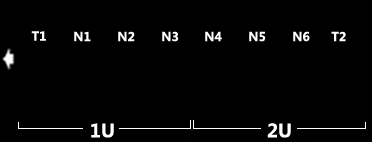
<style>
.page{position:relative;width:372px;height:142px;background:#000000}
.page>*{position:absolute;margin:0}
.t1{font:12px "MicrosoftYaHei-Bold";color:#ffffff}
.t2{font:18px "MicrosoftYaHei-Bold";color:#ffffff}
</style>
<div class="page">
<p class="t1" style="left:31px;top:31px;width:15px;height:10px">T1</p>
<p class="t1" style="left:74px;top:31px;width:17px;height:11px">N1</p>
<p class="t1" style="left:118px;top:31px;width:17px;height:11px">N2</p>
<p class="t1" style="left:162px;top:31px;width:17px;height:11px">N3</p>
<p class="t1" style="left:205px;top:31px;width:17px;height:11px">N4</p>
<p class="t1" style="left:249px;top:31px;width:17px;height:11px">N5</p>
<p class="t1" style="left:293px;top:31px;width:17px;height:11px">N6</p>
<p class="t1" style="left:331px;top:31px;width:15px;height:11px">T2</p>
<p class="t2" style="left:91px;top:123px;width:23px;height:15px">1U</p>
<p class="t2" style="left:267px;top:123px;width:24px;height:15px">2U</p>
</div>
